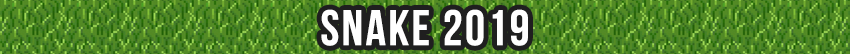
<style>
.page{position:relative;width:850px;height:54px}
.page>*{position:absolute;margin:0}
.t1{font:50px "BebasNeueBold";letter-spacing:0.05em;color:#ffffff}
</style>
<div class="page">
<p class="t1" style="left:321px;top:9px;width:207px;height:37px">Snake 2019</p>
</div>
